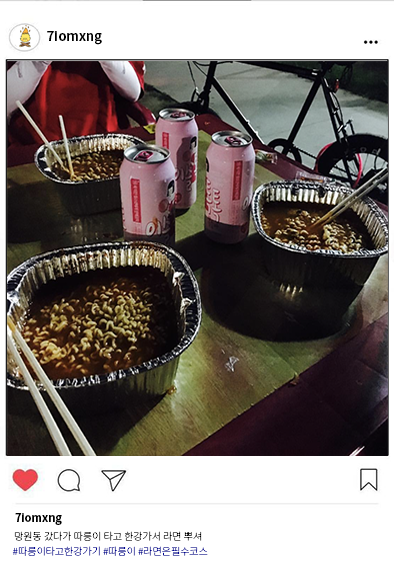
<style>
.page{position:relative;width:394px;height:577px;background:#ffffff}
.page>*{position:absolute;margin:0}
.t1{font:13px "NotoSansKR-Bold";color:#000000}
.t2{font:11px "NotoSansKR-Bold";color:#000000}
.t3{font:10px "NotoSansKR-Thin";color:#000000}
.t4{font:10px "NotoSansKR-Thin";color:#000495}
</style>
<div class="page">
<p class="t1" style="left:47px;top:31px;width:55px;height:14px">7iomxng</p>
<p class="t2" style="left:15px;top:513px;width:47px;height:12px">7iomxng</p>
<p class="t3" style="left:14px;top:531px;width:188px;height:10px">망원동 갔다가 따릉이 타고 한강가서 라면 뿌셔</p>
<p class="t4" style="left:12px;top:546px;width:196px;height:10px">#따릉이타고한강가기 #따릉이 #라면은필수코스</p>
</div>
